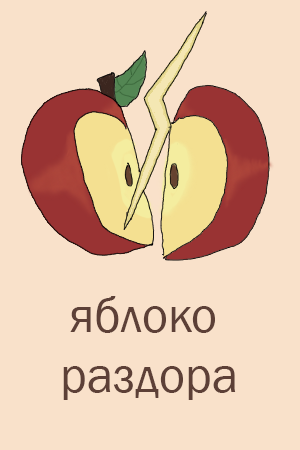
<style>
.page{position:relative;width:300px;height:450px;background:#f9e1ca}
.page>*{position:absolute;margin:0}
.t1{font:50px "FranklinGothic-Book";color:#5d4037}
</style>
<div class="page">
<p class="t1" style="left:63px;top:296px;width:173px;height:104px;text-align:center">яблоко <br>раздора</p>
</div>
